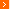
<style>
.page{position:relative;width:12px;height:9px;background:#ff6600}
.page>*{position:absolute;margin:0}
.t1{font:9px "ArialMT";letter-spacing:0.01em;color:#ffffff}
</style>
<div class="page">
<p class="t1" style="left:3px;top:2px;width:3px;height:5px">&gt;</p>
</div>
